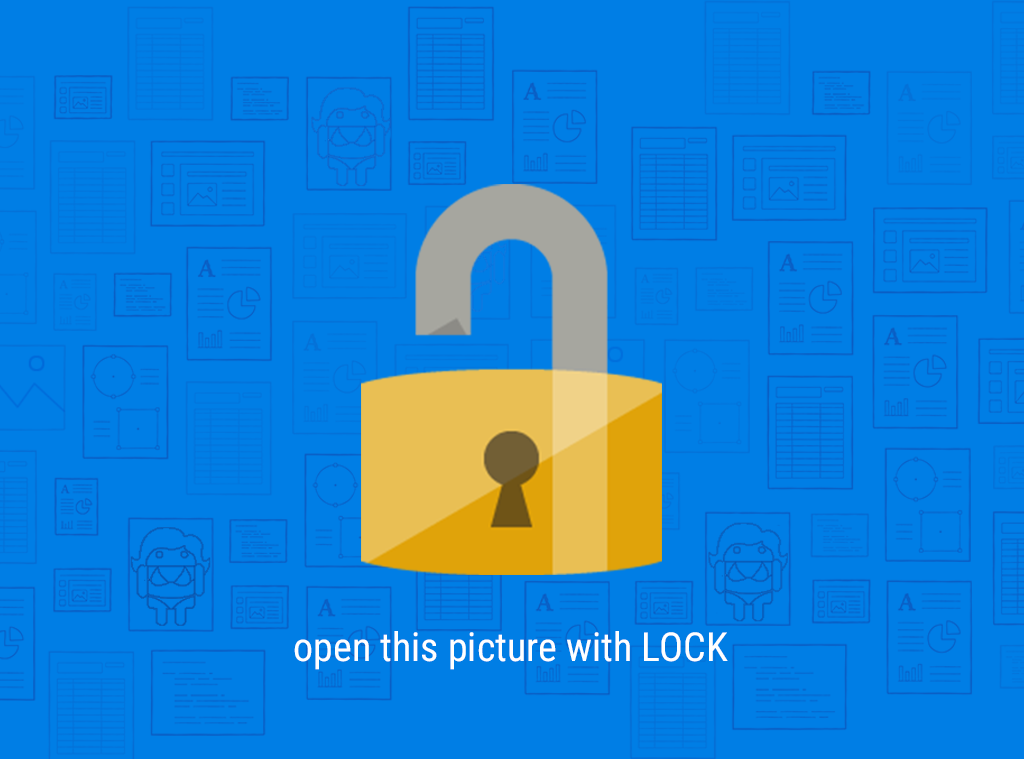
<style>
.page{position:relative;width:1024px;height:759px;background:#007ee5}
.page>*{position:absolute;margin:0}
.t1{font:40px "RobotoCondensed-Regular";color:#ffffff}
</style>
<div class="page">
<p class="t1" style="left:294px;top:631px;width:434px;height:39px">open this picture with LOCK</p>
</div>
